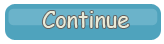
<style>
.page{position:relative;width:164px;height:44px;background:#4fa3bd}
.page>*{position:absolute;margin:0}
.t1{font:23.2px "ComicSansMS";color:#eaebd8;scale:0.94 1}
</style>
<div class="page">
<p class="t1" style="left:42px;top:11px;width:87px;height:17px">Continue</p>
</div>
